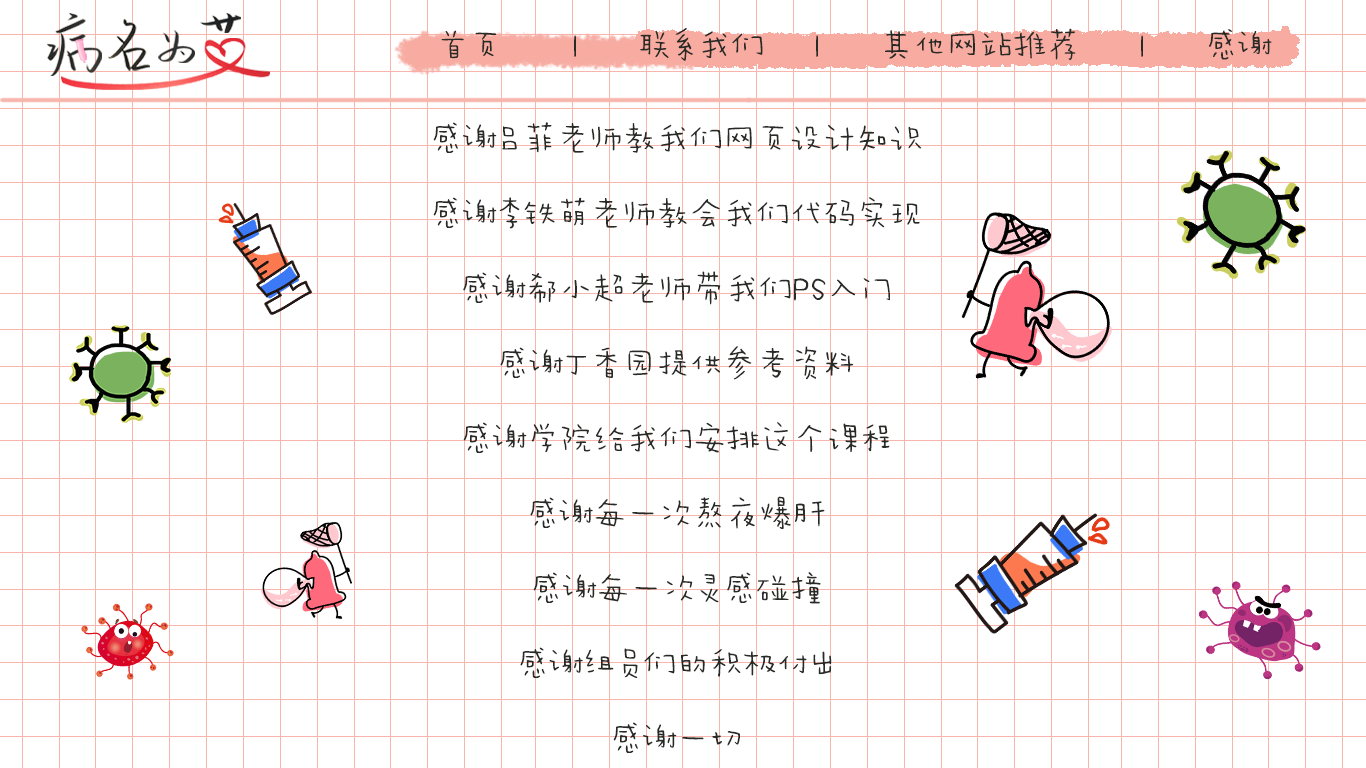
<style>
.page{position:relative;width:1366px;height:768px;background:#ffffff}
.page>*{position:absolute;margin:0}
.t1{font:33.3px "AaWanWan";color:#282a26}
.t2{font:33.3px/75px "AaWanWan";color:#282a26}
</style>
<div class="page">
<p class="t1" style="left:441px;top:27px;width:831px;height:34px">首页       |      联系我们     |      其他网站推荐      |      感谢</p>
<p class="t2" style="left:433px;top:122px;width:489px;height:631px;text-align:center">感谢吕菲老师教我们网页设计知识<br>感谢李铁萌老师教会我们代码实现<br>感谢郗小超老师带我们PS入门<br>感谢丁香园提供参考资料<br>感谢学院给我们安排这个课程<br>感谢每一次熬夜爆肝<br>感谢每一次灵感碰撞<br>感谢组员们的积极付出<br>感谢一切</p>
</div>
